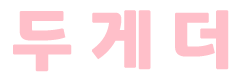
<style>
.page{position:relative;width:250px;height:84px;background:#ffffff}
.page>*{position:absolute;margin:0}
.t1{font:70.3px "GyeonggiTitleVOTF";letter-spacing:0.12em;color:#ffbfc9;font-weight:bold}
</style>
<div class="page">
<p class="t1" style="left:13px;top:10px;width:216px;height:62px">두게더</p>
</div>
